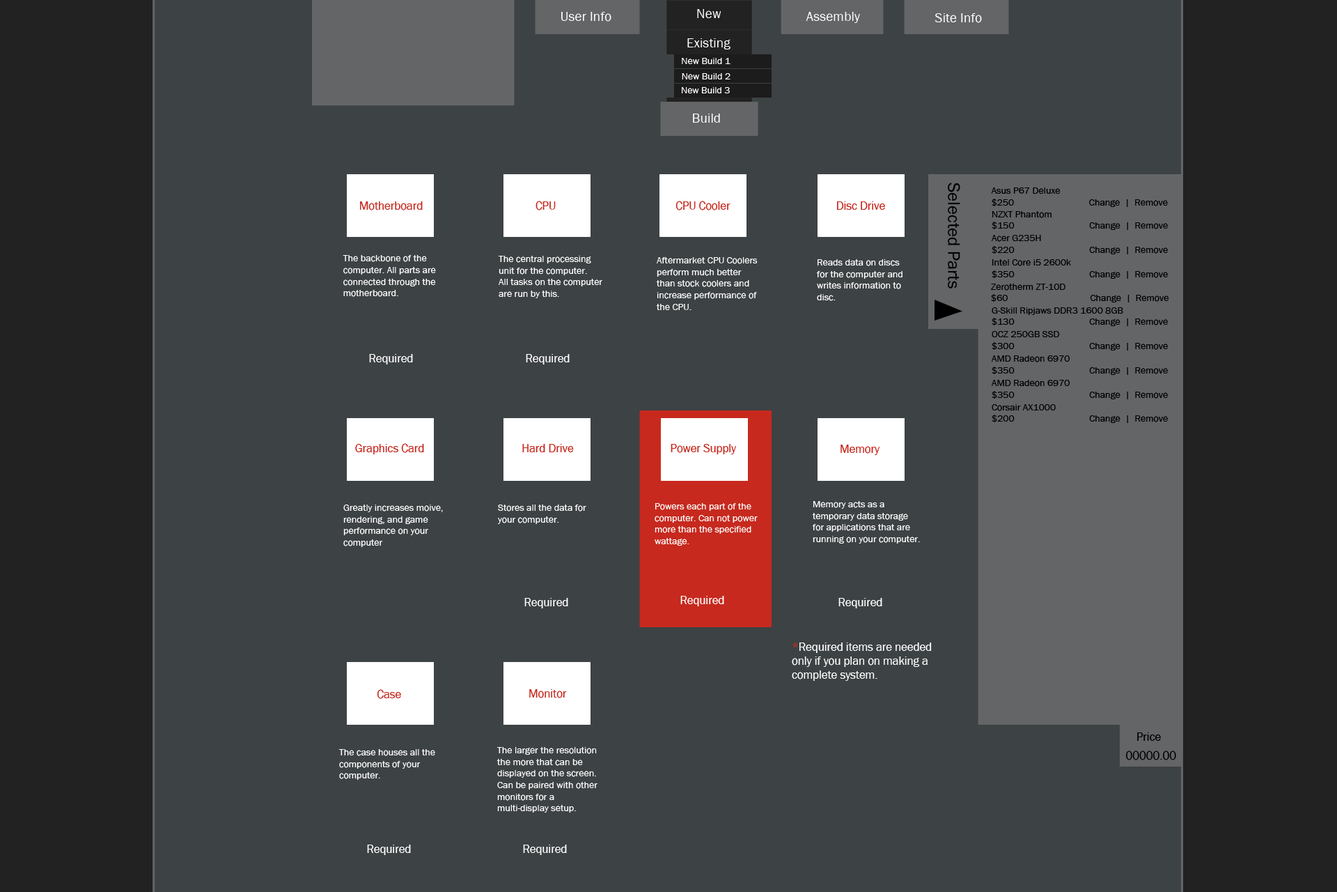
<style>
.page{position:relative;width:1337px;height:892px;background:#3d4244}
.page>*{position:absolute;margin:0}
.t1{font:13.5px "FranklinGothic-Book";color:#ffffff}
.t2{font:9.7px "FranklinGothic-Book";color:#ffffff}
.t3{font:17.4px "FranklinGothic-Book";color:#000000}
.t4{font:9.7px "FranklinGothic-Book";color:#000000}
.t5{font:11.6px "FranklinGothic-Book";color:#c7291e}
.t6{font:11.6px "FranklinGothic-Book";color:#ffffff}
.t7{font:11.6px "FranklinGothic-Book";color:#000000}
</style>
<div class="page">
<p class="t1" style="left:561px;top:12px;width:51px;height:10px">User Info</p>
<p class="t1" style="left:697px;top:9px;width:25px;height:9px">New</p>
<p class="t1" style="left:806px;top:12px;width:54px;height:11px">Assembly</p>
<p class="t1" style="left:935px;top:13px;width:47px;height:10px">Site Info</p>
<p class="t1" style="left:688px;top:38px;width:43px;height:11px">Existing</p>
<p class="t2" style="left:682px;top:58px;width:49px;height:6px">New Build 1</p>
<p class="t2" style="left:682px;top:73px;width:49px;height:6px">New Build 2</p>
<p class="t2" style="left:682px;top:87px;width:48px;height:6px">New Build 3</p>
<p class="t1" style="left:693px;top:114px;width:27px;height:9px">Build</p>
<p class="t3" style="left:948px;top:182px;width:13px;height:106px;rotate:90deg">Selected Parts</p>
<p class="t4" style="left:991px;top:187px;width:177px;height:20px">Asus P67 Deluxe<br>$250                               Change  |  Remove</p>
<p class="t5" style="left:360px;top:201px;width:63px;height:9px">Motherboard</p>
<p class="t5" style="left:536px;top:201px;width:20px;height:9px">CPU</p>
<p class="t5" style="left:676px;top:201px;width:55px;height:9px">CPU Cooler</p>
<p class="t5" style="left:837px;top:201px;width:48px;height:9px">Disc Drive</p>
<p class="t4" style="left:992px;top:211px;width:176px;height:19px">NZXT Phantom<br>$150                               Change  |  Remove</p>
<p class="t4" style="left:992px;top:235px;width:176px;height:19px">Acer G235H<br>$220                               Change  |  Remove</p>
<p class="t2" style="left:343px;top:255px;width:93px;height:42px">The backbone of the<br>computer. All parts are<br>connected through the<br>motherboard.</p>
<p class="t2" style="left:499px;top:256px;width:104px;height:42px">The central processing<br>unit for the computer.<br>All tasks on the computer<br>are run by this.</p>
<p class="t2" style="left:656px;top:257px;width:102px;height:53px">Aftermarket CPU Coolers<br>perform much better<br>than stock coolers and<br>increase performance of<br>the CPU.</p>
<p class="t2" style="left:816px;top:259px;width:87px;height:42px">Reads data on discs<br>for the computer and<br>writes information to <br>disc.</p>
<p class="t4" style="left:992px;top:259px;width:176px;height:20px">Intel Core i5 2600k<br>$350                               Change  |  Remove</p>
<p class="t4" style="left:991px;top:284px;width:179px;height:18px">Zerotherm ZT-10D<br>$60                                  Change  |  Remove</p>
<p class="t4" style="left:992px;top:307px;width:176px;height:19px">G-Skill Ripjaws DDR3 1600 8GB<br>$130                               Change  |  Remove</p>
<p class="t4" style="left:992px;top:331px;width:176px;height:19px">OCZ 250GB SSD<br>$300                               Change  |  Remove</p>
<p class="t6" style="left:369px;top:354px;width:44px;height:10px">Required</p>
<p class="t6" style="left:526px;top:354px;width:44px;height:10px">Required</p>
<p class="t4" style="left:992px;top:355px;width:176px;height:20px">AMD Radeon 6970<br>$350                               Change  |  Remove</p>
<p class="t4" style="left:992px;top:380px;width:176px;height:19px">AMD Radeon 6970<br>$350                               Change  |  Remove</p>
<p class="t4" style="left:992px;top:404px;width:176px;height:19px">Corsair AX1000<br>$200                               Change  |  Remove</p>
<p class="t5" style="left:355px;top:443px;width:69px;height:11px">Graphics Card</p>
<p class="t5" style="left:522px;top:444px;width:52px;height:8px">Hard Drive</p>
<p class="t5" style="left:671px;top:444px;width:66px;height:10px">Power Supply</p>
<p class="t5" style="left:841px;top:444px;width:39px;height:11px">Memory</p>
<p class="t2" style="left:343px;top:504px;width:100px;height:43px">Greatly increases moive,<br>rendering, and game<br>performance on your<br>computer</p>
<p class="t2" style="left:498px;top:504px;width:89px;height:20px">Stores all the data for<br>your computer.</p>
<p class="t2" style="left:655px;top:503px;width:103px;height:42px">Powers each part of the<br>computer. Can not power<br>more than the specified <br>wattage.</p>
<p class="t2" style="left:812px;top:501px;width:108px;height:42px">Memory acts as a <br>temporary data storage <br>for applications that are<br>running on your computer.</p>
<p class="t6" style="left:525px;top:598px;width:43px;height:10px">Required</p>
<p class="t6" style="left:681px;top:596px;width:43px;height:10px">Required</p>
<p class="t6" style="left:839px;top:598px;width:44px;height:10px">Required</p>
<p class="t6" style="left:792px;top:642px;width:140px;height:39px"><span class="t5">*</span>Required items are needed <br>only if you plan on making a<br>complete system.</p>
<p class="t5" style="left:377px;top:689px;width:24px;height:10px">Case</p>
<p class="t5" style="left:529px;top:689px;width:38px;height:9px">Monitor</p>
<p class="t7" style="left:1137px;top:732px;width:24px;height:8px">Price</p>
<p class="t2" style="left:339px;top:749px;width:96px;height:30px">The case houses all the<br>components of your<br>computer.</p>
<p class="t2" style="left:497px;top:747px;width:101px;height:65px">The larger the resolution<br>the more that can be<br>displayed on the screen.<br>Can be paired with other <br>monitors for a<br>multi-display setup.</p>
<p class="t7" style="left:1126px;top:750px;width:50px;height:10px">00000.00</p>
<p class="t6" style="left:367px;top:844px;width:44px;height:11px">Required</p>
<p class="t6" style="left:523px;top:844px;width:44px;height:11px">Required</p>
</div>
